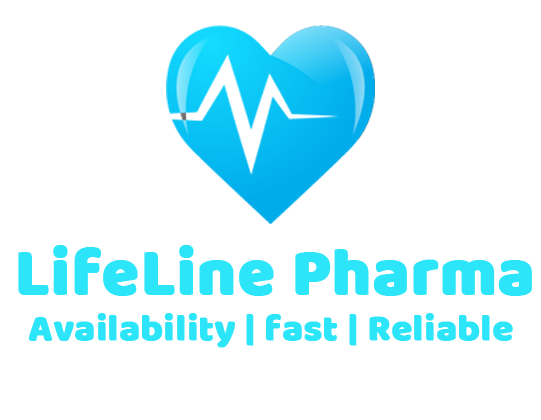
<style>
.page{position:relative;width:541px;height:420px;background:#ffffff}
.page>*{position:absolute;margin:0}
.t1{font:66.7px "BalooDa-Regular";color:#2de5f9;font-weight:bold}
.t2{font:37.5px "BalooDa-Regular";color:#2de5f9;font-weight:bold}
</style>
<div class="page">
<p class="t1" style="left:18px;top:245px;width:514px;height:51px">LifeLine Pharma</p>
<p class="t2" style="left:28px;top:313px;width:485px;height:35px">Availability | fast | Reliable</p>
</div>
